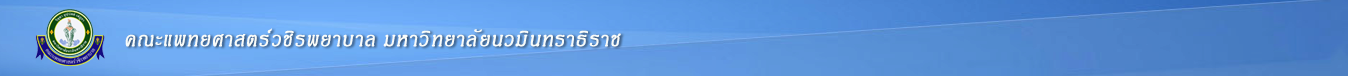
<style>
.page{position:relative;width:1348px;height:76px}
.page>*{position:absolute;margin:0}
.t1{font:28px "JasmineUPC";letter-spacing:0.02em;color:#f9fcf9;font-weight:bold;font-style:italic;scale:0.9 1}
</style>
<div class="page">
<p class="t1" style="left:125px;top:28px;width:496px;height:19px">คณะแพทยศาสตร์วชิรพยาบาล มหาวิทยาลัยนวมินทราธิราช</p>
</div>
